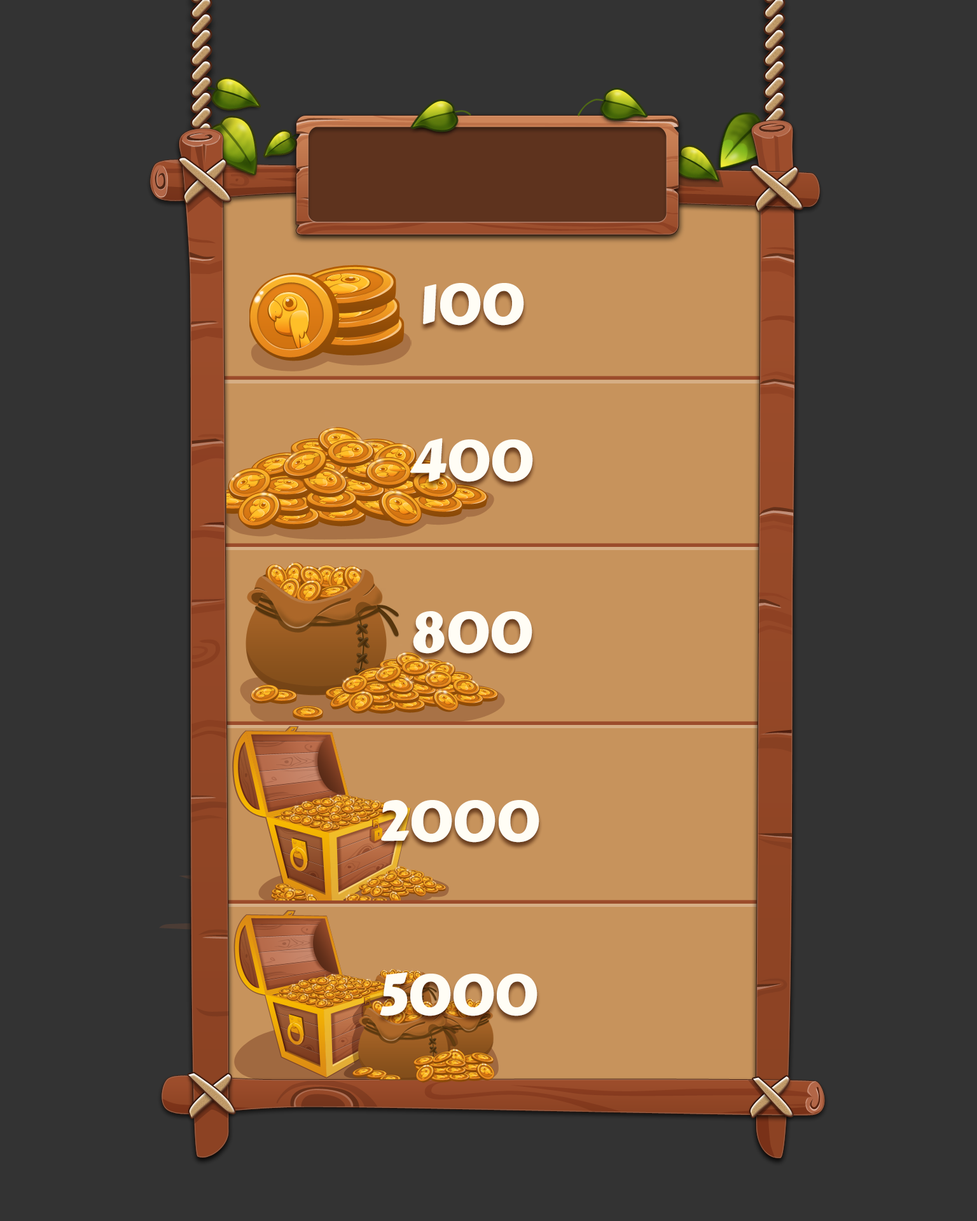
<style>
.page{position:relative;width:977px;height:1221px;background:#333333}
.page>*{position:absolute;margin:0}
.t1{font:55.9px "CarterOne";letter-spacing:-0.02em;color:#fefefe}
</style>
<div class="page">
<p class="t1" style="left:423px;top:283px;width:101px;height:43px">100</p>
<p class="t1" style="left:410px;top:438px;width:123px;height:44px">400</p>
<p class="t1" style="left:413px;top:611px;width:119px;height:43px">800</p>
<p class="t1" style="left:381px;top:800px;width:158px;height:43px">2000</p>
<p class="t1" style="left:380px;top:972px;width:157px;height:44px">5000</p>
</div>
